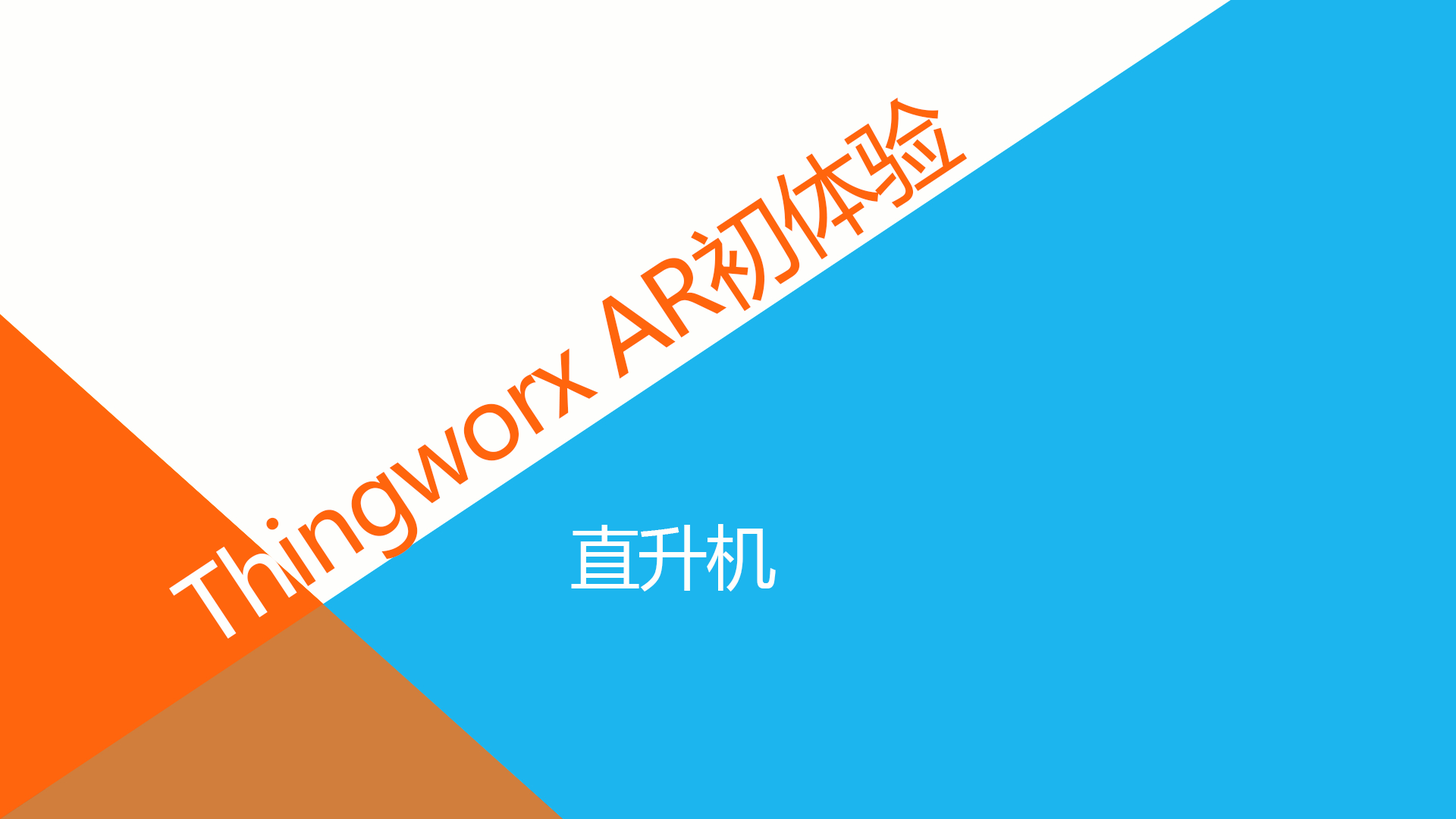
<style>
.page{position:relative;width:1456px;height:819px;background:#1cb5ee}
.page>*{position:absolute;margin:0}
.t1{font:98.1px "MicrosoftYaHei";letter-spacing:-0.03em;color:#ff650d}
.t2{font:98.1px "MicrosoftYaHei";letter-spacing:-0.03em;color:#fefefc}
.t3{font:70px "MicrosoftYaHei";letter-spacing:-0.03em;color:#fefefc}
</style>
<div class="page">
<p class="t1" style="left:169px;top:97px;width:799px;height:542px;rotate:-34deg"><span class="t2">Th</span>ingworx AR初体验</p>
<p class="t3" style="left:571px;top:524px;width:205px;height:67px">直升机</p>
</div>
